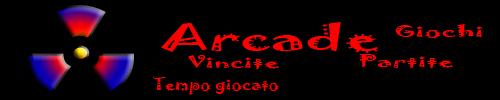
<style>
.page{position:relative;width:500px;height:100px;background:#000000}
.page>*{position:absolute;margin:0}
.t1{font:31.7px "Jokerman-Regular";color:#fe0000;scale:1.89 1}
.t2{font:14.7px "Jokerman-Regular";color:#ff0000;scale:1.91 1}
.t3{font:14.7px "Jokerman-Regular";color:#ff0000;scale:1.87 1}
.t4{font:14.7px "Jokerman-Regular";color:#ff0000;scale:1.83 1}
.t5{font:14.7px "Jokerman-Regular";color:#ff0000;scale:1.2 1}
</style>
<div class="page">
<p class="t1" style="left:161px;top:22px;width:217px;height:31px">Arcade</p>
<p class="t2" style="left:395px;top:24px;width:88px;height:15px">Giochi</p>
<p class="t3" style="left:359px;top:54px;width:94px;height:14px">Partite</p>
<p class="t4" style="left:188px;top:55px;width:91px;height:14px">Vincite</p>
<p class="t5" style="left:153px;top:76px;width:126px;height:19px">Tempo giocato</p>
</div>
